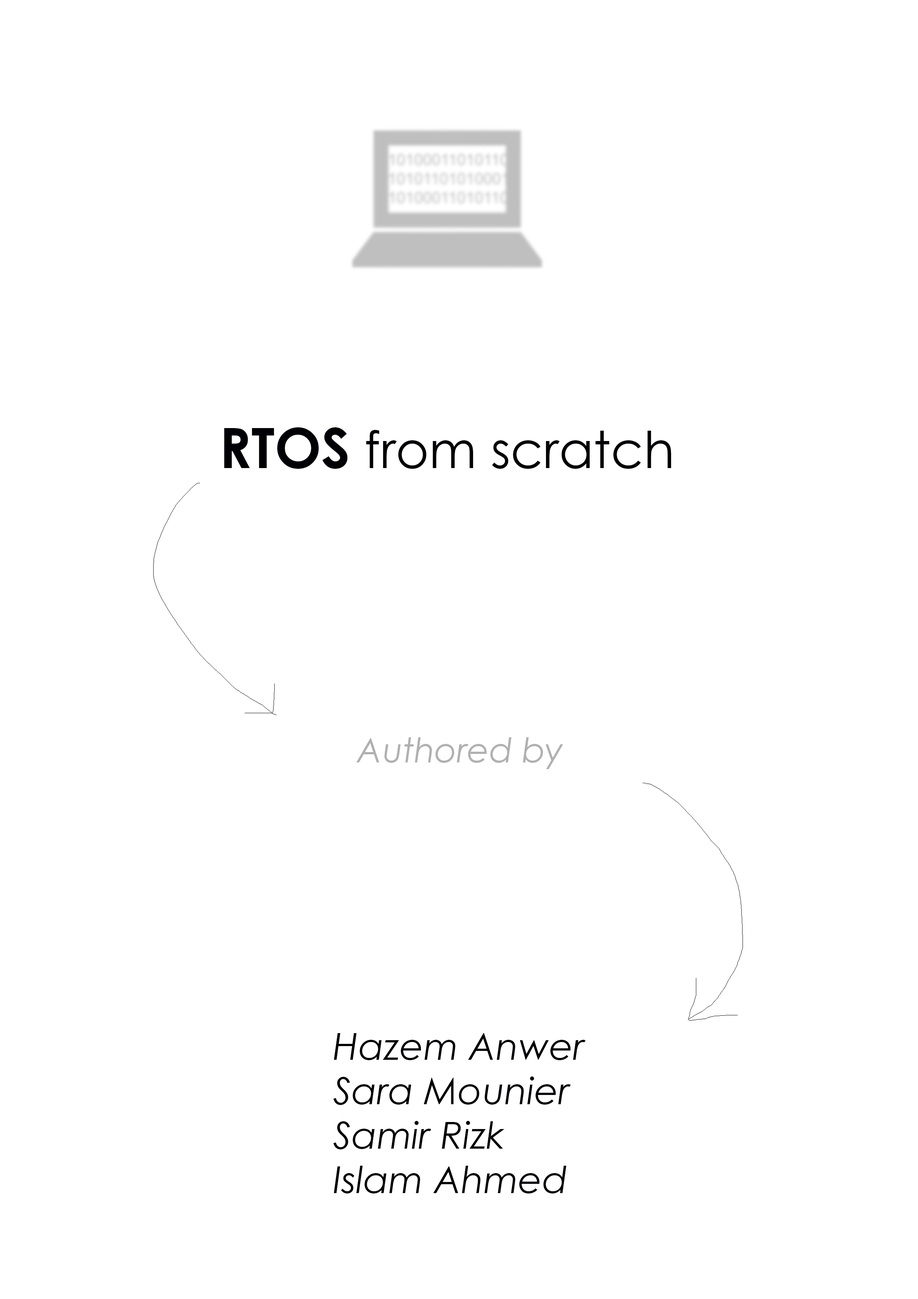
<style>
.page{position:relative;width:918px;height:1299px;background:#ffffff}
.page>*{position:absolute;margin:0}
.t1{font:50.9px "CenturyGothic";color:#010005}
.t2{font:55.5px "CenturyGothic-Bold";color:#010005}
.t3{font:33.9px "CenturyGothic-Italic";color:#b0b0b0}
.t4{font:37px "CenturyGothic-Italic";color:#010005}
</style>
<div class="page">
<p class="t1" style="left:224px;top:427px;width:447px;height:42px"><span class="t2">RTOS </span>from scratch</p>
<p class="t3" style="left:356px;top:737px;width:207px;height:32px">Authored by</p>
<p class="t4" style="left:333px;top:1033px;width:253px;height:160px">Hazem Anwer<br>Sara Mounier<br>Samir Rizk<br>Islam Ahmed</p>
</div>
